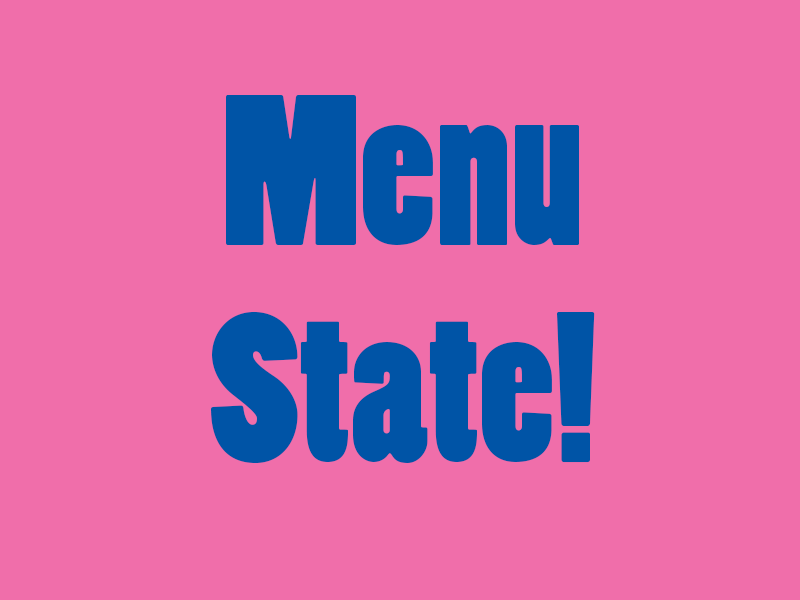
<style>
.page{position:relative;width:800px;height:600px;background:#f06eaa}
.page>*{position:absolute;margin:0}
.t1{font:200px/216.7px "PoplarStd";color:#0054a6}
</style>
<div class="page">
<p class="t1" style="left:211px;top:95px;width:384px;height:368px;text-align:center">Menu<br>State!</p>
</div>
